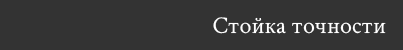
<style>
.page{position:relative;width:403px;height:50px;background:#333333}
.page>*{position:absolute;margin:0}
.t1{font:24px "CrimsonText-Regular";color:#ffffff}
</style>
<div class="page">
<p class="t1" style="left:213px;top:17px;width:173px;height:17px">Стойка точности</p>
</div>
